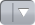
<style>
.page{position:relative;width:35px;height:25px;background:#c3c7cf}
.page>*{position:absolute;margin:0}
.t1{font:12.8px "ArialMT";letter-spacing:0.1em;color:#ffffff;scale:1.25 1}
</style>
<div class="page">
<p class="t1" style="left:17px;top:8px;width:12px;height:9px">▼</p>
</div>
